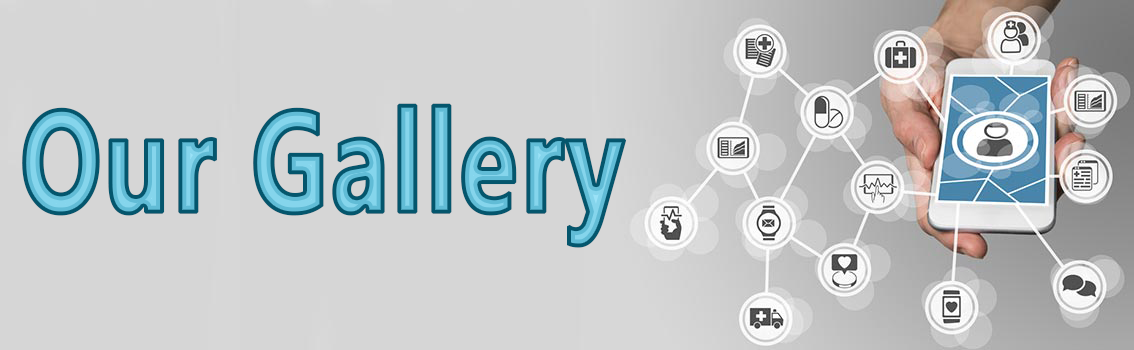
<style>
.page{position:relative;width:1134px;height:350px;background:#d6d6d6}
.page>*{position:absolute;margin:0}
.t1{font:144px "MicrosoftPhagsPa-Bold";font-weight:bold;scale:0.75 1}
</style>
<div class="page">
<p class="t1" style="left:22px;top:103px;width:605px;height:145px">Our Gallery</p>
</div>
